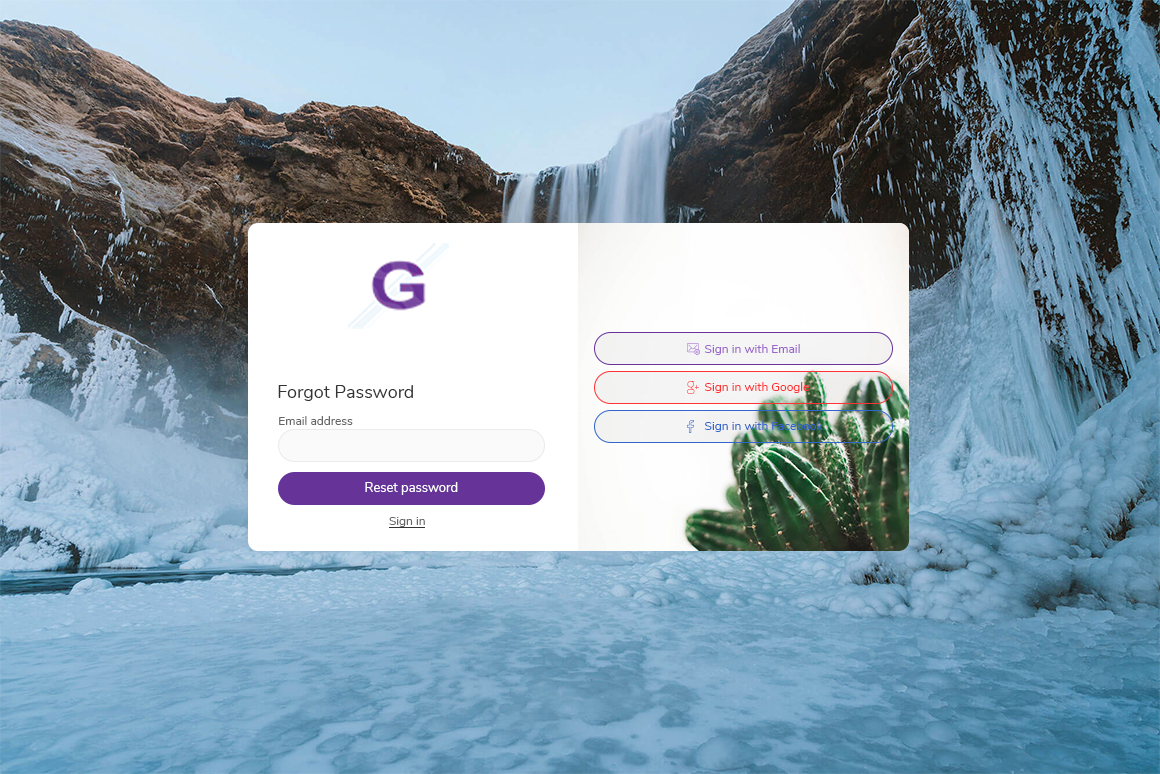
<style>
.page{position:relative;width:1160px;height:774px}
.page>*{position:absolute;margin:0}
.t1{font:12px "Nunito-Regular";color:#9966cc}
.t2{font:18px "Nunito-Regular";color:#333333}
.t3{font:12px "Nunito-Regular";color:#ff3333}
.t4{font:12px "Nunito-Regular";color:#666666}
.t5{font:12px "Nunito-Regular";color:#3366cc}
.t6{font:13px "Nunito-Regular";color:#ffffff}
</style>
<div class="page">
<p class="t1" style="left:704px;top:344px;width:96px;height:11px">Sign in with Email</p>
<p class="t2" style="left:278px;top:385px;width:135px;height:16px">Forgot Password</p>
<p class="t3" style="left:704px;top:382px;width:105px;height:11px">Sign in with Google</p>
<p class="t4" style="left:279px;top:416px;width:74px;height:9px">Email address</p>
<p class="t5" style="left:704px;top:421px;width:119px;height:11px">Sign in with Facebook</p>
<p class="t6" style="left:365px;top:482px;width:93px;height:13px">Reset password</p>
<p class="t4" style="left:389px;top:517px;width:36px;height:10px">Sign in</p>
</div>
